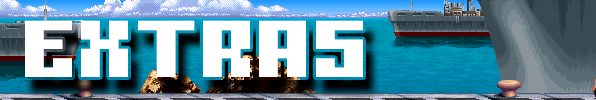
<style>
.page{position:relative;width:596px;height:100px}
.page>*{position:absolute;margin:0}
.t1{font:150px "Gamer";color:#ffffff}
</style>
<div class="page">
<p class="t1" style="left:25px;top:20px;width:338px;height:57px">EXTRAS</p>
</div>
